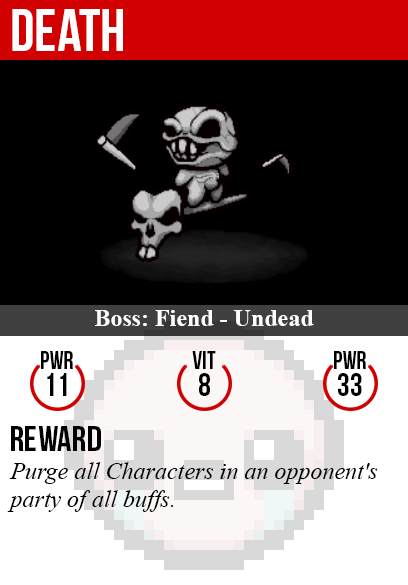
<style>
.page{position:relative;width:408px;height:585px;background:#000000}
.page>*{position:absolute;margin:0}
.t1{font:60px "BebasNeue";color:#ffffff}
.t2{font:24px "TimesNewRomanPS-BoldMT";color:#ffffff}
.t3{font:25px "BebasNeue";color:#000000}
.t4{font:32px "BebasNeue";color:#000000}
.t5{font:36px "BebasNeue";color:#000000}
.t6{font:24px "TimesNewRomanPS-ItalicMT";color:#000000}
</style>
<div class="page">
<p class="t1" style="left:12px;top:9px;width:111px;height:42px">death</p>
<p class="t2" style="left:95px;top:310px;width:219px;height:16px">Boss: Fiend - Undead</p>
<p class="t3" style="left:41px;top:351px;width:32px;height:18px">PWR</p>
<p class="t3" style="left:192px;top:351px;width:24px;height:18px">vit</p>
<p class="t3" style="left:334px;top:351px;width:32px;height:18px">PWR</p>
<p class="t4" style="left:47px;top:373px;width:20px;height:23px">11</p>
<p class="t4" style="left:199px;top:373px;width:11px;height:23px">8</p>
<p class="t4" style="left:338px;top:373px;width:24px;height:23px">33</p>
<p class="t5" style="left:11px;top:426px;width:90px;height:25px">reward</p>
<p class="t6" style="left:7px;top:462px;width:371px;height:50px">Purge all Characters in an opponent's<br>party of all buffs.</p>
</div>
